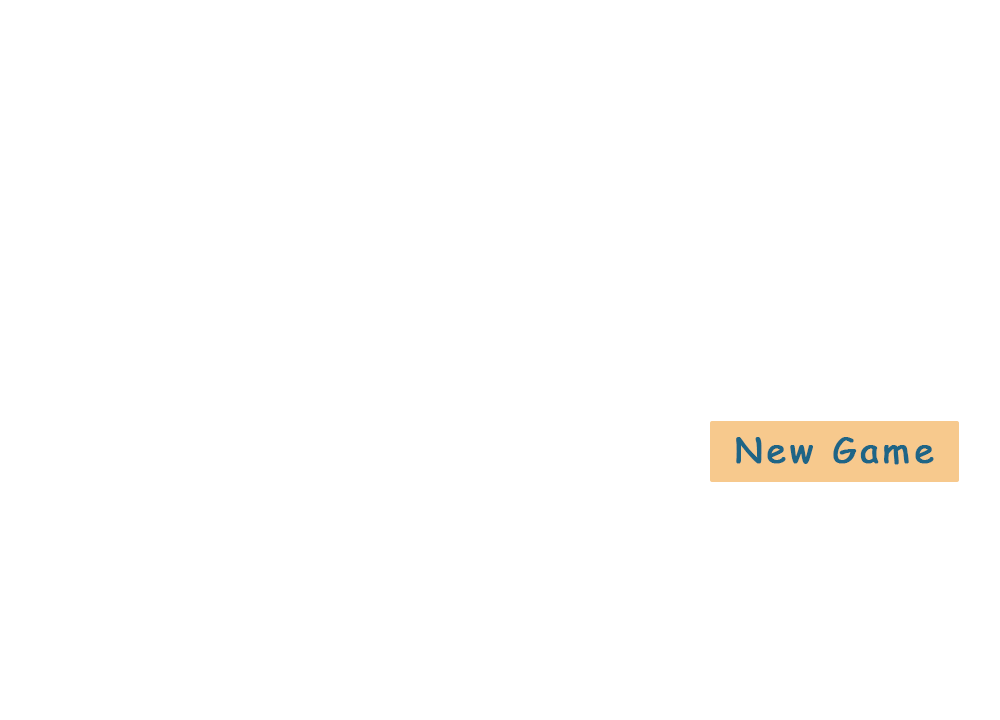
<style>
.page{position:relative;width:1000px;height:720px;background:#ffffff}
.page>*{position:absolute;margin:0}
.t1{font:34.7px "ComicSansMS";letter-spacing:0.1em;color:#1e6586;font-weight:bold}
</style>
<div class="page">
<p class="t1" style="left:736px;top:437px;width:198px;height:28px">New Game</p>
</div>
